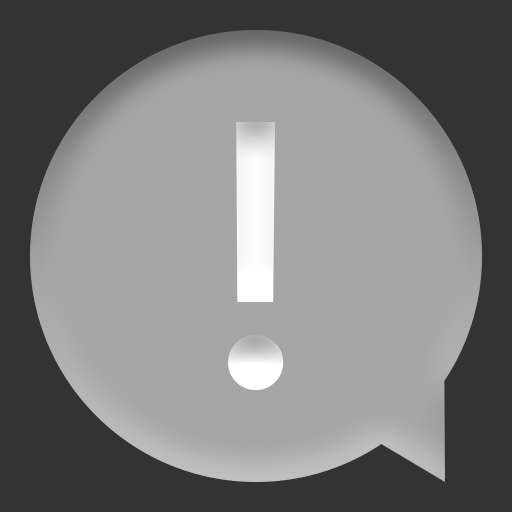
<style>
.page{position:relative;width:512px;height:512px;background:#a6a6a6}
.page>*{position:absolute;margin:0}
.t1{font:380.6px "CascadiaCode-Regular";color:#ffffff;text-transform:uppercase}
</style>
<div class="page">
<p class="t1" style="left:228px;top:122px;width:56px;height:268px">!</p>
</div>
